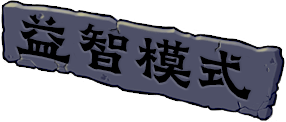
<style>
.page{position:relative;width:286px;height:122px;background:#ffffff}
.page>*{position:absolute;margin:0}
.t1{font:61.1px "GraveBustedStoneLishuSCRoughlyC";color:#000000;scale:1.11 1}
</style>
<div class="page">
<p class="t1" style="left:16px;top:14px;width:235px;height:86px;rotate:12deg">益智模式</p>
</div>
